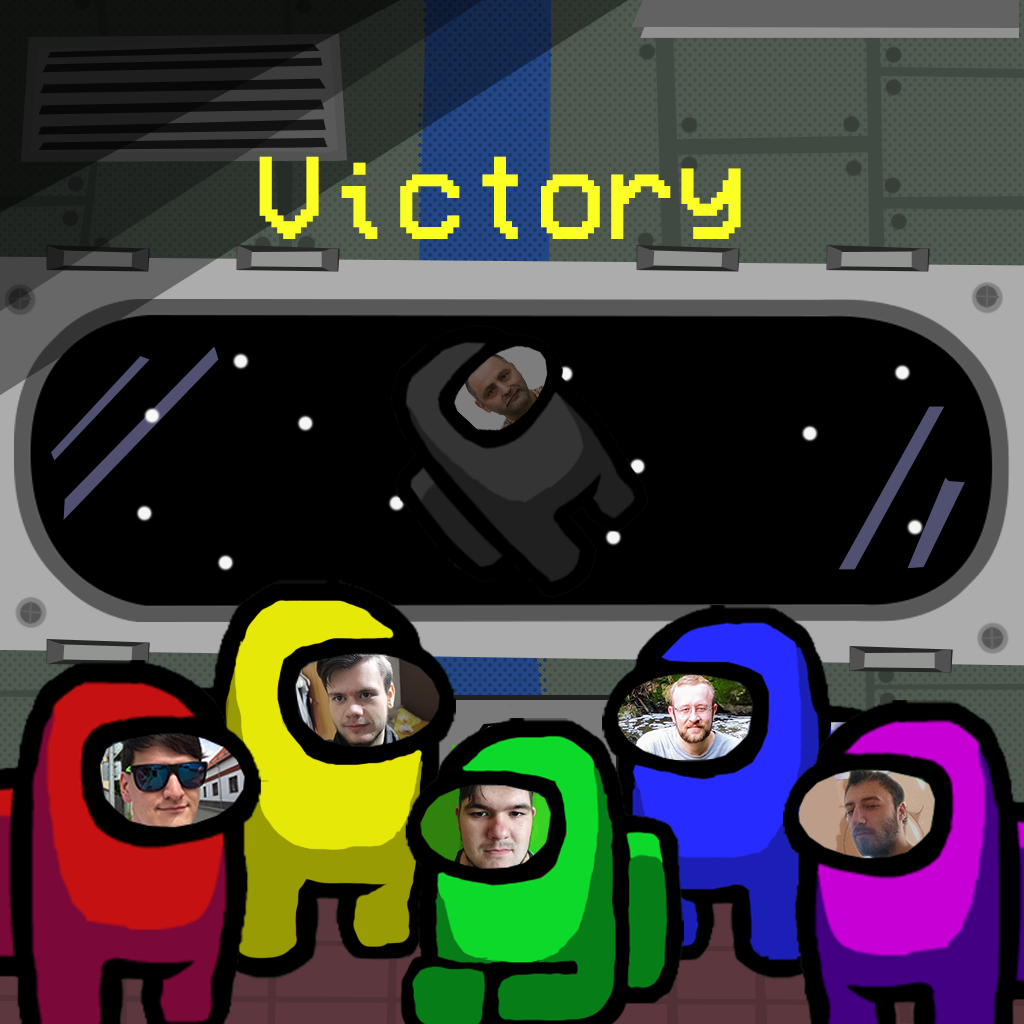
<style>
.page{position:relative;width:1024px;height:1024px;background:#000000}
.page>*{position:absolute;margin:0}
.t1{font:120px "VCROSDMono";color:#fcff24}
</style>
<div class="page">
<p class="t1" style="left:259px;top:156px;width:482px;height:83px">Victory</p>
</div>
